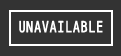
<style>
.page{position:relative;width:121px;height:56px;background:#333333}
.page>*{position:absolute;margin:0}
.t1{font:15.1px "Menlo-Regular";letter-spacing:0.075em;color:#ffffff;font-weight:bold;scale:0.73 1}
</style>
<div class="page">
<p class="t1" style="left:19px;top:20px;width:84px;height:13px">UNAVAILABLE</p>
</div>
